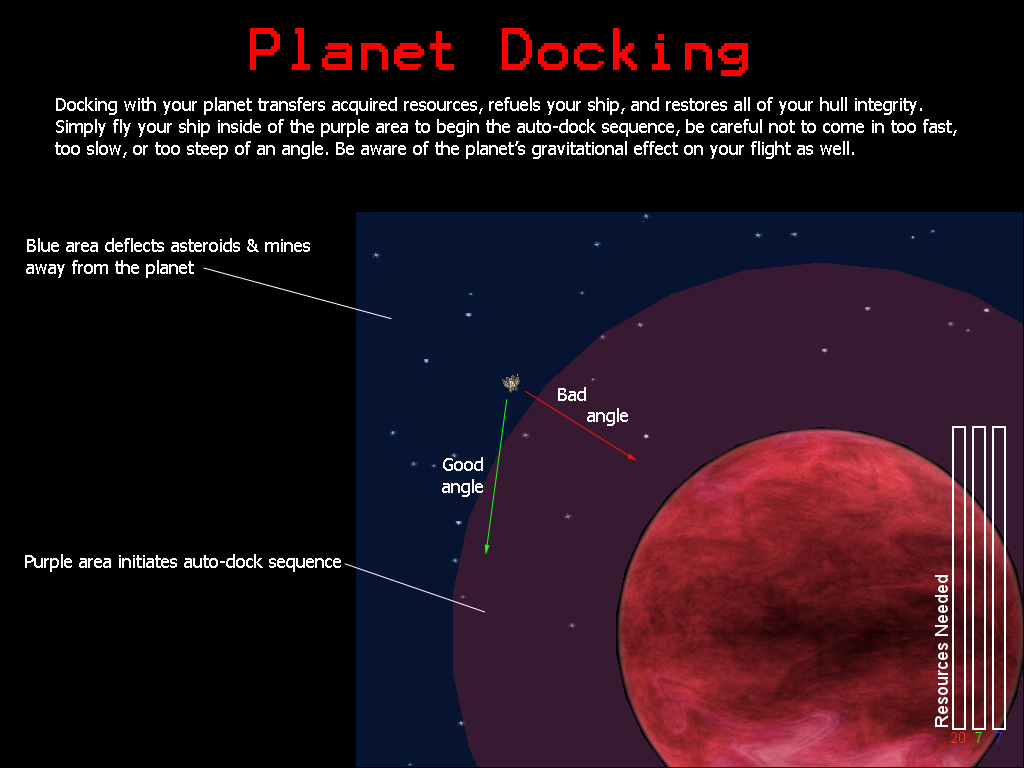
<style>
.page{position:relative;width:1024px;height:768px;background:#000000}
.page>*{position:absolute;margin:0}
.t1{font:48px "Terminal";color:#ff0000}
.t2{font:18px "Tahoma";color:#ffffff}
</style>
<div class="page">
<p class="t1" style="left:250px;top:28px;width:498px;height:48px">Planet Docking</p>
<p class="t2" style="left:55px;top:97px;width:902px;height:62px">Docking with your planet transfers acquired resources, refuels your ship, and restores all of your hull integrity.<br>Simply fly your ship inside of the purple area to begin the auto-dock sequence, be careful not to come in too fast,<br>too slow, or too steep of an angle. Be aware of the planet’s gravitational effect on your flight as well.</p>
<p class="t2" style="left:26px;top:238px;width:284px;height:40px">Blue area deflects asteroids &amp; mines<br>away from the planet</p>
<p class="t2" style="left:558px;top:387px;width:70px;height:39px">Bad<br>     angle</p>
<p class="t2" style="left:442px;top:457px;width:41px;height:40px">Good<br>angle</p>
<p class="t2" style="left:25px;top:554px;width:316px;height:18px">Purple area initiates auto-dock sequence</p>
</div>
